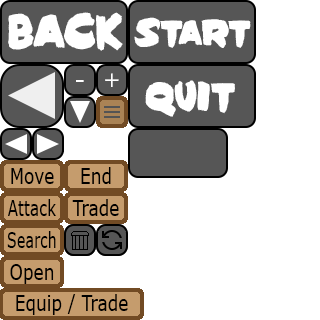
<style>
.page{position:relative;width:320px;height:320px;background:#ffffff}
.page>*{position:absolute;margin:0}
.t1{font:36.4px "Sin-City-Regular";color:#ffffff;scale:0.77 1}
.t2{font:27.3px "Sin-City-Regular";color:#ffffff;scale:0.77 1}
.t3{font:29.9px "Sin-City-Regular";color:#ffffff;scale:0.77 1}
.t4{font:22.1px "Verdana";color:#000000;scale:0.77 1}
.t5{font:22.1px "Verdana";color:#000000;scale:0.69 1}
.t6{font:22.1px "Verdana";color:#000000;scale:0.65 1}
</style>
<div class="page">
<p class="t1" style="left:8px;top:12px;width:115px;height:39px">back</p>
<p class="t2" style="left:134px;top:17px;width:117px;height:31px">Start</p>
<p class="t3" style="left:145px;top:80px;width:90px;height:37px">Quit</p>
<p class="t4" style="left:11px;top:168px;width:43px;height:16px">Move</p>
<p class="t4" style="left:81px;top:167px;width:30px;height:17px">End</p>
<p class="t5" style="left:8px;top:199px;width:48px;height:17px">Attack</p>
<p class="t4" style="left:72px;top:199px;width:47px;height:17px">Trade</p>
<p class="t6" style="left:7px;top:231px;width:49px;height:17px">Search</p>
<p class="t4" style="left:10px;top:264px;width:44px;height:20px">Open</p>
<p class="t4" style="left:16px;top:294px;width:112px;height:21px">Equip / Trade</p>
</div>
